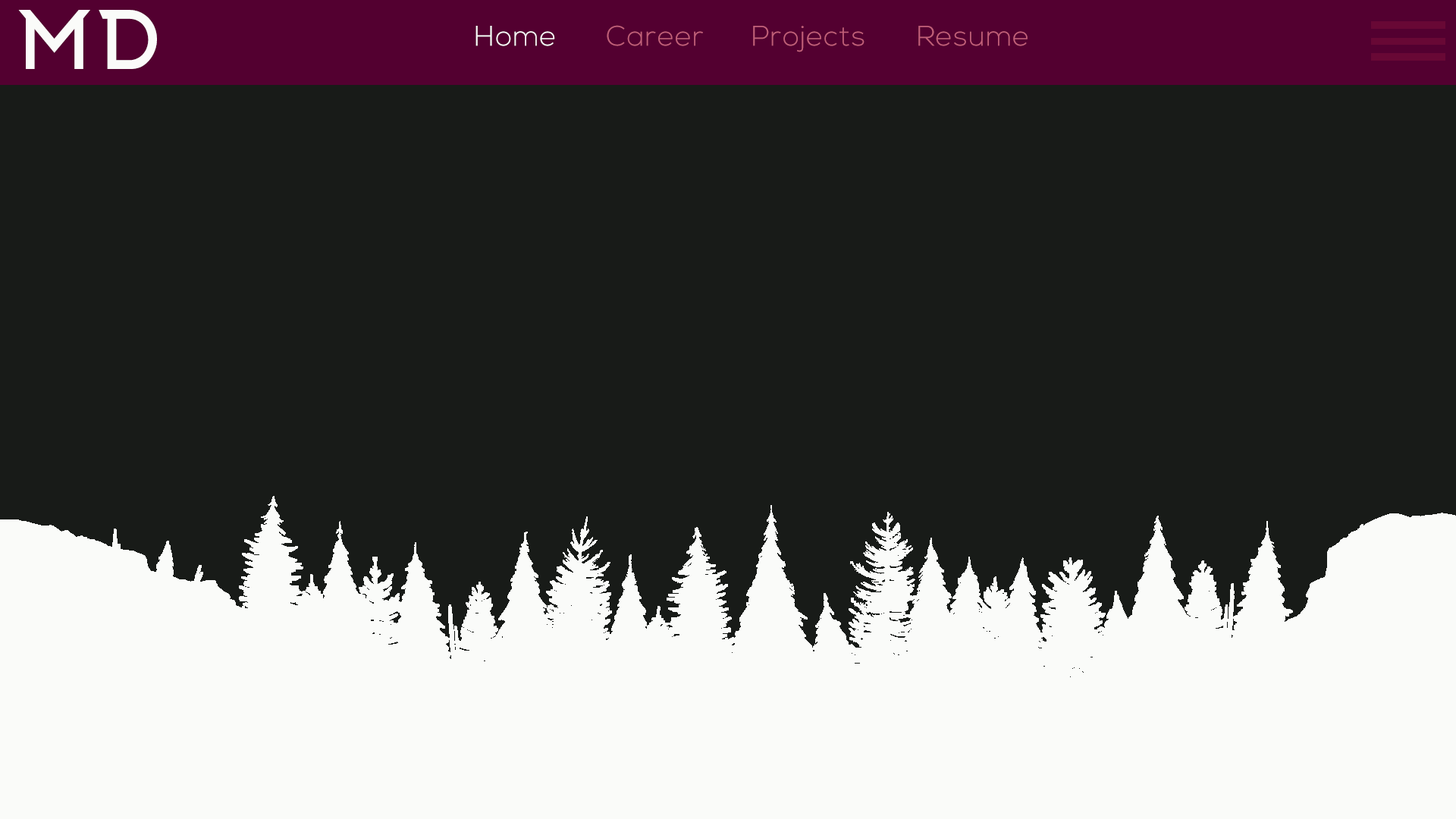
<style>
.page{position:relative;width:1456px;height:819px;background:#181b18}
.page>*{position:absolute;margin:0}
.t1{font:79px "Arkhip";letter-spacing:0.03em;color:#fafbf9}
.t2{font:28.4px "NexaLight";letter-spacing:0.03em;color:#fafbf9}
.t3{font:28.4px "NexaLight";letter-spacing:0.03em;color:#c15f78}
</style>
<div class="page">
<p class="t1" style="left:18px;top:10px;width:139px;height:59px">MD</p>
<p class="t2" style="left:475px;top:26px;width:80px;height:20px">Home</p>
<p class="t3" style="left:607px;top:25px;width:96px;height:21px">Career</p>
<p class="t3" style="left:753px;top:26px;width:111px;height:26px">Projects</p>
<p class="t3" style="left:918px;top:26px;width:110px;height:20px">Resume</p>
</div>
